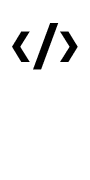
<style>
.page{position:relative;width:90px;height:180px;background:#ffffff}
.page>*{position:absolute;margin:0}
.t1{font:80px "MyriadPro-Bold";color:#000000}
.t2{font:64px "MyriadPro-Bold";color:#000000;scale:1.25 1}
</style>
<div class="page">
<p class="t1" style="left:12px;top:23px;width:66px;height:47px">‹<span class="t2">/</span>›</p>
</div>
